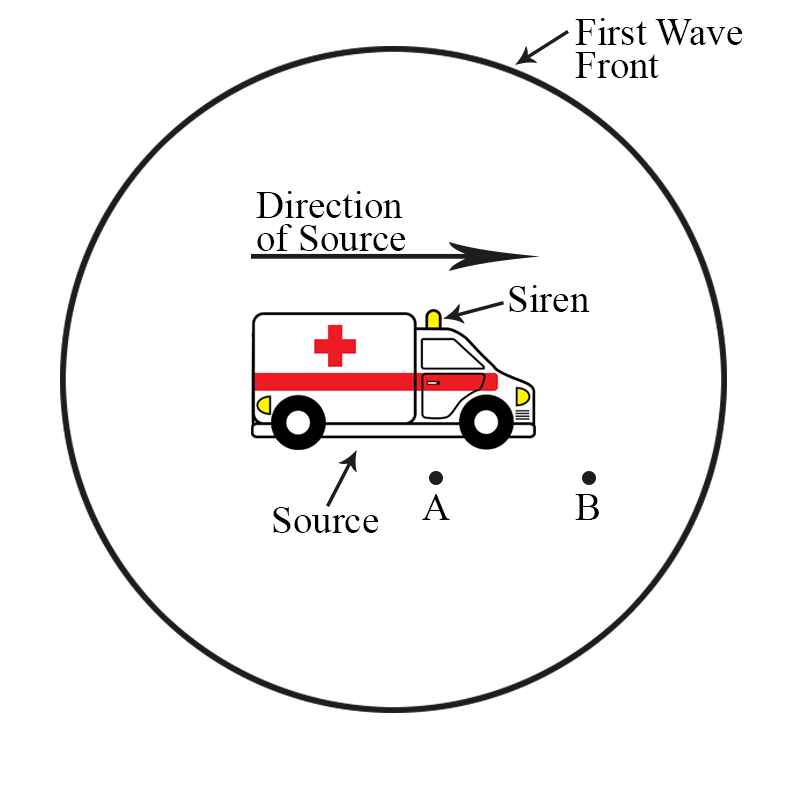
<style>
.page{position:relative;width:787px;height:787px;background:#ffffff}
.page>*{position:absolute;margin:0}
.t1{font:38.9px/33.3px "TimesNewRomanPSMT";color:#000000}
.t2{font:38.9px "TimesNewRomanPSMT";color:#000000}
</style>
<div class="page">
<p class="t1" style="left:575px;top:18px;width:168px;height:60px">First Wave <br>Front</p>
<p class="t1" style="left:256px;top:191px;width:150px;height:60px">Direction <br>of Source</p>
<p class="t2" style="left:509px;top:285px;width:81px;height:27px">Siren</p>
<p class="t2" style="left:422px;top:494px;width:28px;height:26px">A</p>
<p class="t2" style="left:575px;top:494px;width:24px;height:26px">B</p>
<p class="t2" style="left:273px;top:507px;width:106px;height:26px">Source</p>
</div>
